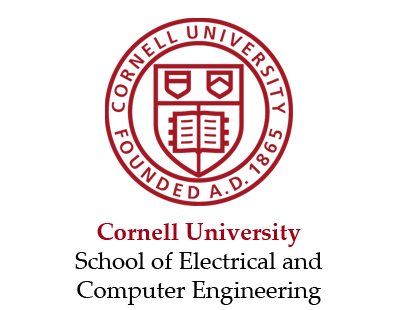
<style>
.page{position:relative;width:398px;height:310px;background:#ffffff}
.page>*{position:absolute;margin:0}
.t1{font:24px "PalatinoLinotype-Roman";color:#000000}
.t2{font:24px "PalatinoLinotype-Bold";color:#a70014}
</style>
<div class="page">
<p class="t1" style="left:75px;top:223px;width:247px;height:82px;text-align:center"><span class="t2">Cornell University<br></span>School of Electrical and<br>Computer Engineering</p>
</div>
